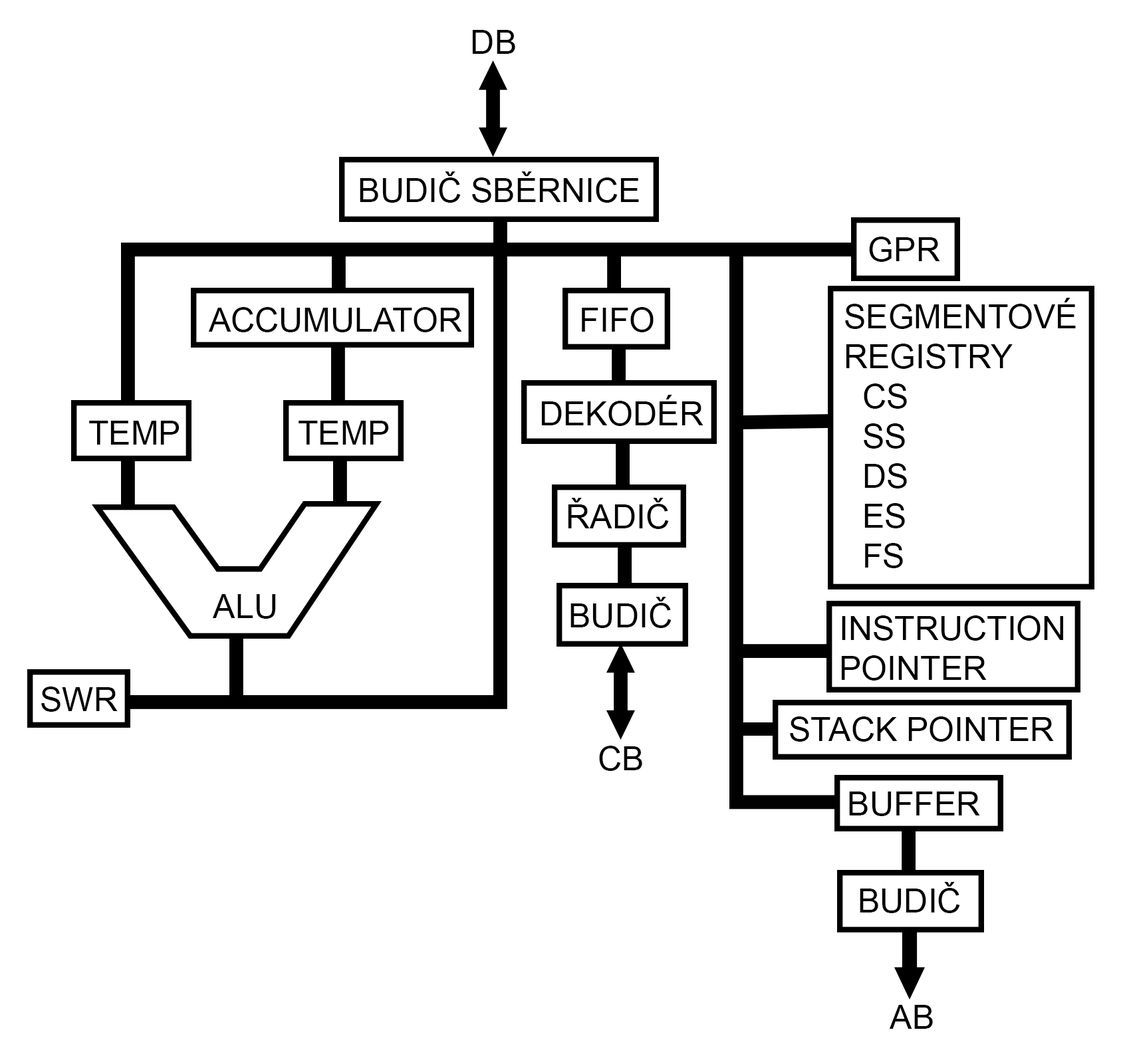
<style>
.page{position:relative;width:1123px;height:1062px;background:#ffffff}
.page>*{position:absolute;margin:0}
.t1{font:33.2px "ArialMT";color:#000000}
</style>
<div class="page">
<p class="t1" style="left:472px;top:30px;width:43px;height:24px">DB</p>
<p class="t1" style="left:360px;top:171px;width:279px;height:32px">BUDIČ SBĚRNICE</p>
<p class="t1" style="left:869px;top:237px;width:71px;height:25px">GPR</p>
<p class="t1" style="left:845px;top:298px;width:230px;height:270px">SEGMENTOVÉ<br>REGISTRY<br>  CS<br>  SS<br>  DS<br>  ES<br>  FS</p>
<p class="t1" style="left:209px;top:307px;width:253px;height:25px">ACCUMULATOR</p>
<p class="t1" style="left:582px;top:307px;width:71px;height:25px">FIFO</p>
<p class="t1" style="left:541px;top:395px;width:162px;height:31px">DEKODÉR</p>
<p class="t1" style="left:89px;top:421px;width:90px;height:24px">TEMP</p>
<p class="t1" style="left:298px;top:421px;width:91px;height:24px">TEMP</p>
<p class="t1" style="left:568px;top:498px;width:101px;height:31px">ŘADIČ</p>
<p class="t1" style="left:213px;top:594px;width:63px;height:25px">ALU</p>
<p class="t1" style="left:570px;top:597px;width:101px;height:31px">BUDIČ</p>
<p class="t1" style="left:841px;top:615px;width:222px;height:66px">INSTRUCTION<br>POINTER</p>
<p class="t1" style="left:41px;top:687px;width:77px;height:25px">SWR</p>
<p class="t1" style="left:790px;top:717px;width:264px;height:25px">STACK POINTER</p>
<p class="t1" style="left:599px;top:746px;width:43px;height:25px">CB</p>
<p class="t1" style="left:849px;top:792px;width:131px;height:24px">BUFFER</p>
<p class="t1" style="left:859px;top:882px;width:101px;height:31px">BUDIČ</p>
<p class="t1" style="left:889px;top:1005px;width:44px;height:24px">AB</p>
</div>
